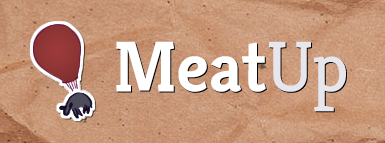
<style>
.page{position:relative;width:385px;height:143px}
.page>*{position:absolute;margin:0}
.t1{font:72px "Kreon-Bold";color:#ffffff}
.t2{font:72px "Kreon-Regular";color:#e7e6ed}
</style>
<div class="page">
<p class="t1" style="left:116px;top:41px;width:230px;height:71px">Meat<span class="t2">Up</span></p>
</div>
